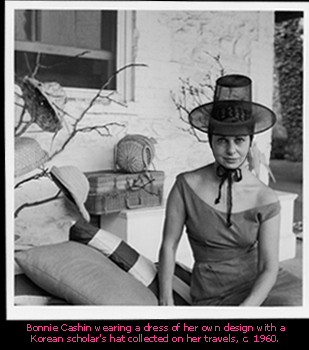
<style>
.page{position:relative;width:309px;height:350px}
.page>*{position:absolute;margin:0}
.t1{font:9.2px "Verdana";color:#ff3399}
</style>
<div class="page">
<p class="t1" style="left:27px;top:323px;width:258px;height:20px;text-align:center">Bonnie Cashin wearing a dress of her own design with a<br>Korean scholar's hat collected on her travels, c. 1960.</p>
</div>
